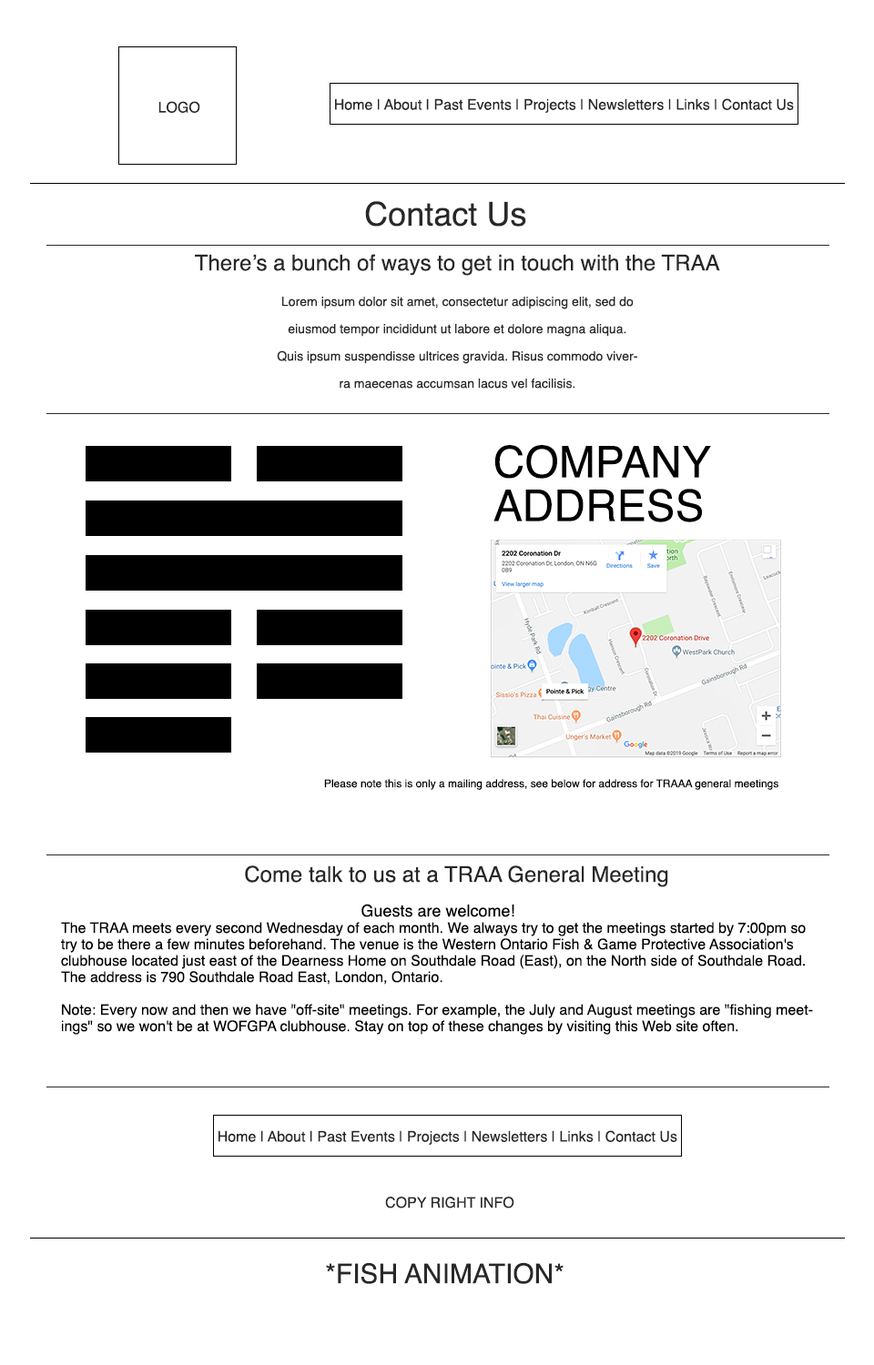
<style>
.page{position:relative;width:874px;height:1365px;background:#ffffff}
.page>*{position:absolute;margin:0}
.t1{font:14.6px "Helvetica";color:#282828}
.t2{font:32.8px "Helvetica";color:#282828}
.t3{font:21.8px "Helvetica";color:#282828}
.t4{font:12.7px/27.3px "Helvetica";color:#282828}
.t5{font:43.7px/43.7px "Helvetica";color:#000000}
.t6{font:10.9px "Helvetica";color:#000000}
.t7{font:14.6px/16.4px "Helvetica";color:#000000}
.t8{font:16.4px/21.8px "Helvetica";color:#000000}
.t9{font:27.3px "Helvetica";color:#282828}
</style>
<div class="page">
<p class="t1" style="left:158px;top:101px;width:42px;height:12px">LOGO</p>
<p class="t1" style="left:335px;top:98px;width:459px;height:15px">Home | About | Past Events | Projects | Newsletters | Links | Contact Us</p>
<p class="t2" style="left:365px;top:201px;width:161px;height:26px">Contact Us</p>
<p class="t3" style="left:195px;top:254px;width:525px;height:22px">There’s a bunch of ways to get in touch with the TRAA</p>
<p class="t4" style="left:277px;top:297px;width:360px;height:92px;text-align:center">Lorem ipsum dolor sit amet, consectetur adipiscing elit, sed do eiusmod tempor incididunt ut labore et dolore magna aliqua. Quis ipsum suspendisse ultrices gravida. Risus commodo viverra maecenas accumsan lacus vel facilisis.</p>
<p class="t5" style="left:493px;top:445px;width:218px;height:77px">COMPANY ADDRESS</p>
<p class="t6" style="left:324px;top:779px;width:454px;height:11px">Please note this is only a mailing address, see below for address for TRAAA general meetings</p>
<p class="t3" style="left:245px;top:865px;width:423px;height:22px">Come talk to us at a TRAA General Meeting</p>
<p class="t7" style="left:61px;top:904px;width:752px;height:131px;text-align:center"><span class="t8">Guests are welcome!<br></span>The TRAA meets every second Wednesday of each month. We always try to get the meetings started by 7:00pm so try to be there a few minutes beforehand. The venue is the Western Ontario Fish &amp; Game Protective Association's clubhouse located just east of the Dearness Home on Southdale Road (East), on the North side of Southdale Road. The address is 790 Southdale Road East, London, Ontario.<br><br>Note: Every now and then we have "off-site" meetings. For example, the July and August meetings are "fishing meetings" so we won't be at WOFGPA clubhouse. Stay on top of these changes by visiting this Web site often.</p>
<p class="t1" style="left:218px;top:1130px;width:459px;height:15px">Home | About | Past Events | Projects | Newsletters | Links | Contact Us</p>
<p class="t1" style="left:385px;top:1197px;width:129px;height:11px">COPY RIGHT INFO</p>
<p class="t9" style="left:326px;top:1262px;width:237px;height:22px">*FISH ANIMATION*</p>
</div>
